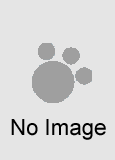
<style>
.page{position:relative;width:115px;height:160px;background:#e5e5e5}
.page>*{position:absolute;margin:0}
.t1{font:22.2px "ArialMT";color:#000000}
</style>
<div class="page">
<p class="t1" style="left:11px;top:119px;width:95px;height:21px">No Image</p>
</div>
